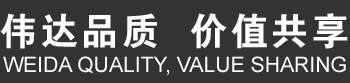
<style>
.page{position:relative;width:350px;height:83px;background:#333333}
.page>*{position:absolute;margin:0}
.t1{font:36.9px "STJTBZ";letter-spacing:0.1em;color:#ffffff}
.t2{font:21.2px "ArialMT";color:#ffffff;text-transform:uppercase}
</style>
<div class="page">
<p class="t1" style="left:0px;top:13px;width:348px;height:36px">伟达品质  价值共享</p>
<p class="t2" style="left:3px;top:56px;width:343px;height:19px">WeiDa quality, Value sharing</p>
</div>
